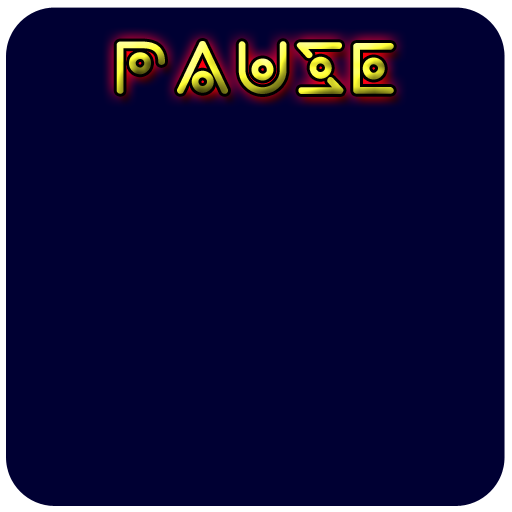
<style>
.page{position:relative;width:512px;height:512px;background:#000033}
.page>*{position:absolute;margin:0}
.t1{font:75px "wearealien!!"}
</style>
<div class="page">
<p class="t1" style="left:116px;top:41px;width:278px;height:53px">Pause</p>
</div>
